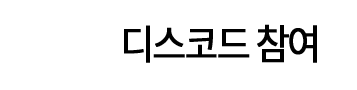
<style>
.page{position:relative;width:357px;height:90px;background:#ffffff}
.page>*{position:absolute;margin:0}
.t1{font:41px "NotoSansCJKkr-Regular";letter-spacing:-0.075em;color:#000000;font-weight:bold;scale:0.9 1}
</style>
<div class="page">
<p class="t1" style="left:124px;top:24px;width:193px;height:39px">디스코드 참여</p>
</div>
